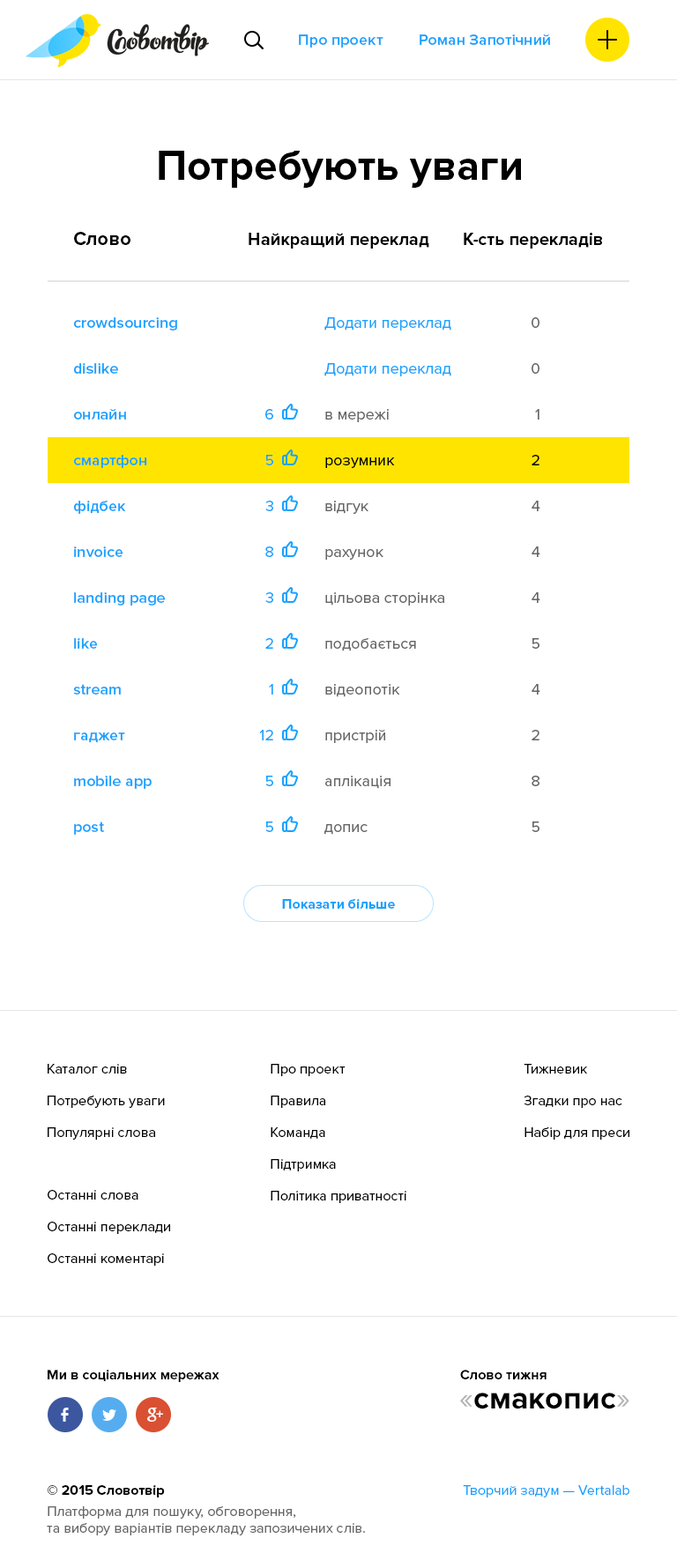
<style>
.page{position:relative;width:677px;height:1568px;background:#ffffff}
.page>*{position:absolute;margin:0}
.t1{font:15.9px "ProximaNova-Semibold";color:#17a2ff}
.t2{font:42.3px "ProximaNova-Bold";color:#000000}
.t3{font:19.4px "ProximaNova-Bold";color:#000000}
.t4{font:17.6px "ProximaNova-Bold";color:#000000}
.t5{font:15.9px/45.8px "ProximaNova-Semibold";color:#17a2ff}
.t6{font:15.9px/45.8px "ProximaNova-Regular";color:#666666}
.t7{font:15.9px/45.8px "ProximaNova-Regular";color:#17a2ff}
.t8{font:15.9px/45.8px "ProximaNova-Regular";color:#000000}
.t9{font:14.1px "ProximaNova-Bold";color:#17a2ff}
.t10{font:14.1px/31.7px "ProximaNova-Regular";color:#000000}
.t11{font:14.1px/31.7px "ProximaNova-Regular";color:#010101}
.t12{font:14.1px "ProximaNova-Bold";color:#010101}
.t13{font:31.7px "ProximaNova-Bold";color:#000000}
.t14{font:31.7px "ProximaNova-Regular";color:#b3b3b3}
.t15{font:14.1px "ProximaNova-Regular";color:#666666}
.t16{font:14.1px/19.4px "ProximaNova-Bold";color:#000000}
.t17{font:14.1px/21.2px "ProximaNova-Regular";color:#666666}
.t18{font:14.1px "ProximaNova-Regular";color:#17a2ff}
</style>
<div class="page">
<p class="t1" style="left:299px;top:34px;width:84px;height:14px">Про проект</p>
<p class="t1" style="left:420px;top:34px;width:130px;height:11px">Роман Запотічний</p>
<p class="t2" style="left:159px;top:151px;width:362px;height:37px">Потребують уваги</p>
<p class="t3" style="left:74px;top:232px;width:56px;height:13px">Слово</p>
<p class="t4" style="left:249px;top:233px;width:180px;height:16px">Найкращий переклад</p>
<p class="t4" style="left:464px;top:233px;width:138px;height:16px">К-сть перекладів</p>
<p class="t5" style="left:73px;top:317px;width:104px;height:518px">crowdsourcing<br>dislike<br>онлайн<br>смартфон<br>фідбек<br>invoice<br>landing page<br>like<br>stream<br>гаджет<br>mobile app<br>post</p>
<p class="t6" style="left:324px;top:317px;width:127px;height:518px"><span class="t7">Додати переклад<br>Додати переклад<br></span>в мережі<br><span class="t8">розумник<br></span>відгук<br>рахунок<br>цільова сторінка<br>подобається<br>відеопотік<br>пристрій<br>аплікація<br>допис</p>
<p class="t6" style="left:531px;top:317px;width:9px;height:515px;text-align:right">0<br>0<br>1<br><span class="t8">2<br></span>4<br>4<br>4<br>5<br>4<br>2<br>8<br>5</p>
<p class="t7" style="left:259px;top:409px;width:14px;height:423px;text-align:right">6<br>5<br>3<br>8<br>3<br>2<br>1<br>12<br>5<br>5</p>
<p class="t9" style="left:282px;top:899px;width:113px;height:10px">Показати більше</p>
<p class="t10" style="left:48px;top:1064px;width:117px;height:76px">Каталог слів<br>Потребують уваги<br>Популярні слова</p>
<p class="t10" style="left:271px;top:1064px;width:135px;height:139px">Про проект<br>Правила<br>Команда<br>Підтримка<br>Політика приватності</p>
<p class="t11" style="left:524px;top:1064px;width:105px;height:76px">Тижневик<br>Згадки про нас<br>Набір для преси</p>
<p class="t10" style="left:48px;top:1190px;width:122px;height:76px">Останні слова<br>Останні переклади<br>Останні коментарі</p>
<p class="t12" style="left:48px;top:1370px;width:171px;height:12px">Ми в соціальних мережах</p>
<p class="t12" style="left:460px;top:1370px;width:86px;height:9px">Слово тижня</p>
<p class="t13" style="left:460px;top:1393px;width:169px;height:16px"><span class="t14">«</span>смакопис<span class="t14">»</span></p>
<p class="t15" style="left:47px;top:1485px;width:318px;height:50px"><span class="t16">© 2015 Словотвір<br></span><span class="t17">Платформа для пошуку, обговорення,<br></span>та вибору варіантів перекладу запозичених слів.</p>
<p class="t18" style="left:463px;top:1485px;width:166px;height:12px">Творчий задум — Vertalab</p>
</div>
